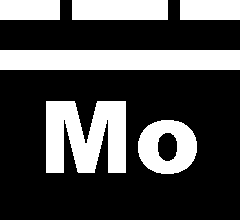
<style>
.page{position:relative;width:240px;height:220px;background:#000000}
.page>*{position:absolute;margin:0}
.t1{font:12px "Arial-Black";color:#ffffff}
</style>
<div class="page">
<p class="t1" style="left:46px;top:101px;width:151px;height:73px;text-align:center">Mo</p>
</div>
